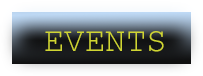
<style>
.page{position:relative;width:203px;height:76px}
.page>*{position:absolute;margin:0}
.t1{font:34px "Rod";color:#d0d533}
</style>
<div class="page">
<p class="t1" style="left:45px;top:31px;width:119px;height:21px">EVENTS</p>
</div>
